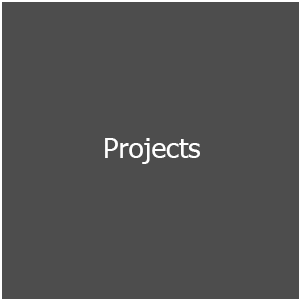
<style>
.page{position:relative;width:300px;height:300px;background:#4d4d4d}
.page>*{position:absolute;margin:0}
.t1{font:27.8px "Tahoma";color:#ffffff}
</style>
<div class="page">
<p class="t1" style="left:105px;top:138px;width:95px;height:26px">Projects</p>
</div>
